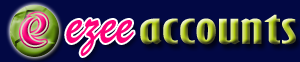
<style>
.page{position:relative;width:300px;height:62px;background:#020844}
.page>*{position:absolute;margin:0}
.t1{font:73.9px "CuteLine"}
.t2{font:41.2px "GillSansMT-ExtraCondensedBold";scale:2.03 1}
.t3{font:59.9px "BrushScriptStd";color:#fb0378;scale:0.77 1}
</style>
<div class="page">
<p class="t1" style="left:19px;top:11px;width:31px;height:38px">e</p>
<p class="t2" style="left:140px;top:14px;width:156px;height:31px">accounts</p>
<p class="t3" style="left:66px;top:19px;width:68px;height:37px">ezee</p>
</div>
